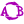
<style>
.page{position:relative;width:24px;height:24px;background:#ffffff}
.page>*{position:absolute;margin:0}
.t1{font:12px "SimSun";color:#aa00b3}
</style>
<div class="page">
<p class="t1" style="left:0px;top:5px;width:24px;height:12px">A B</p>
</div>
